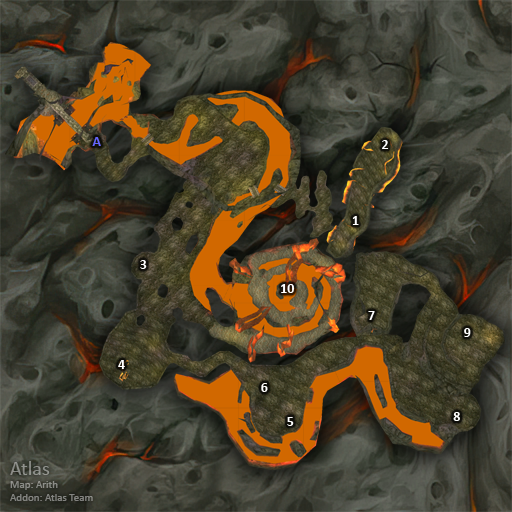
<style>
.page{position:relative;width:512px;height:512px}
.page>*{position:absolute;margin:0}
.t1{font:14px "Calibri-Bold";color:#6666ff}
.t2{font:14px "Calibri-Bold";color:#ffffff}
.t3{font:11px "Calibri";color:#898a85}
.t4{font:20px "Calibri";color:#898a85}
</style>
<div class="page">
<p class="t1" style="left:92px;top:137px;width:9px;height:9px">A</p>
<p class="t2" style="left:382px;top:140px;width:7px;height:9px">2</p>
<p class="t2" style="left:352px;top:216px;width:7px;height:9px">1</p>
<p class="t2" style="left:140px;top:260px;width:7px;height:9px">3</p>
<p class="t2" style="left:281px;top:284px;width:14px;height:9px">10</p>
<p class="t2" style="left:368px;top:311px;width:7px;height:9px">7</p>
<p class="t2" style="left:464px;top:328px;width:7px;height:9px">9</p>
<p class="t2" style="left:118px;top:360px;width:7px;height:9px">4</p>
<p class="t2" style="left:261px;top:383px;width:7px;height:9px">6</p>
<p class="t2" style="left:453px;top:412px;width:7px;height:9px">8</p>
<p class="t2" style="left:287px;top:417px;width:7px;height:9px">5</p>
<p class="t3" style="left:10px;top:461px;width:83px;height:40px"><span class="t4">Atlas<br></span>Map: Arith<br>Addon: Atlas Team</p>
</div>
